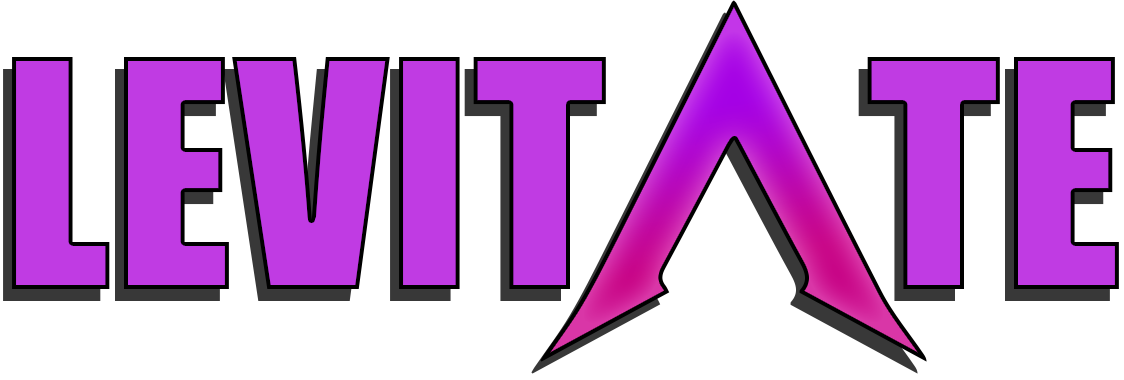
<style>
.page{position:relative;width:1124px;height:380px;background:#ffffff}
.page>*{position:absolute;margin:0}
.t1{font:293.7px "Impact";color:#c03be3}
</style>
<div class="page">
<p class="t1" style="left:12px;top:57px;width:1107px;height:232px">LEVIT     TE</p>
</div>
